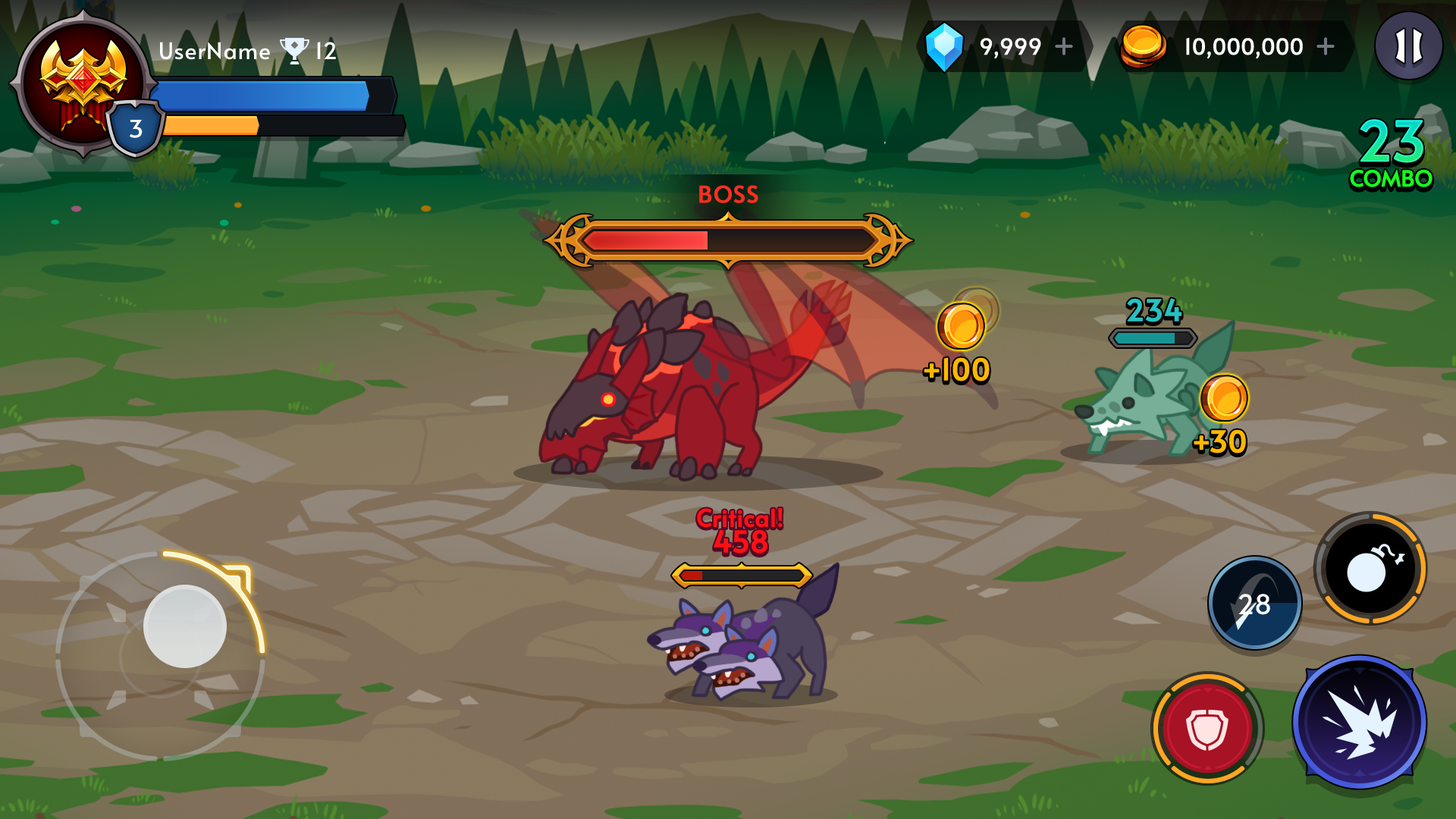
<style>
.page{position:relative;width:1456px;height:819px}
.page>*{position:absolute;margin:0}
.t1{font:22.7px "Alata-Regular";color:#ffffff}
.t2{font:21.9px "Alata-Regular";letter-spacing:-0.025em;color:#ffffff;font-weight:bold}
.t3{font:24.2px "Alata-Regular";color:#fbfde7}
.t4{font:54.6px "Alata-Regular";font-weight:bold}
.t5{font:21.8px "Alata-Regular";color:#15ff20;font-weight:bold}
.t6{font:21.8px "Alata-Regular";font-weight:bold}
.t7{font:22.7px "Alata-Regular";color:#ff2e21;text-transform:uppercase;font-weight:bold}
.t8{font:29.1px "Alata-Regular";font-weight:bold}
.t9{font:29.1px "Alata-Regular";color:#27c1c1;font-weight:bold}
.t10{font:29.1px "Alata-Regular";color:#ffb700;font-weight:bold}
.t11{font:23.7px "Alata-Regular";font-weight:bold}
.t12{font:23.7px "Alata-Regular";color:#fe1015;font-weight:bold}
.t13{font:29.1px "Alata-Regular";color:#fe1015;font-weight:bold}
.t14{font:27.3px "Alata-Regular";color:#ffffff}
</style>
<div class="page">
<p class="t1" style="left:160px;top:42px;width:110px;height:18px">UserName</p>
<p class="t1" style="left:317px;top:42px;width:19px;height:17px">12</p>
<p class="t2" style="left:981px;top:38px;width:60px;height:20px">9,999</p>
<p class="t2" style="left:1186px;top:37px;width:117px;height:21px">10,000,000</p>
<p class="t3" style="left:130px;top:120px;width:13px;height:18px">3</p>
<p class="t4" style="left:1360px;top:120px;width:63px;height:44px">23</p>
<p class="t4" style="left:1360px;top:121px;width:63px;height:44px">23</p>
<p class="t4" style="left:1360px;top:121px;width:63px;height:44px">23</p>
<p class="t4" style="left:1360px;top:122px;width:63px;height:44px">23</p>
<p class="t4" style="left:1360px;top:119px;width:63px;height:44px">23</p>
<p class="t5" style="left:1350px;top:170px;width:82px;height:18px">COMBO</p>
<p class="t6" style="left:1350px;top:171px;width:82px;height:18px">COMBO</p>
<p class="t6" style="left:1350px;top:171px;width:82px;height:19px">COMBO</p>
<p class="t5" style="left:1350px;top:169px;width:82px;height:18px">COMBO</p>
<p class="t7" style="left:699px;top:185px;width:59px;height:18px">Boss</p>
<p class="t8" style="left:1127px;top:300px;width:55px;height:24px">234</p>
<p class="t9" style="left:1127px;top:299px;width:55px;height:24px">234</p>
<p class="t9" style="left:1127px;top:298px;width:55px;height:24px">234</p>
<p class="t8" style="left:924px;top:360px;width:66px;height:24px">+100</p>
<p class="t10" style="left:924px;top:359px;width:66px;height:24px">+100</p>
<p class="t10" style="left:924px;top:358px;width:66px;height:24px">+100</p>
<p class="t10" style="left:924px;top:357px;width:66px;height:24px">+100</p>
<p class="t8" style="left:1194px;top:432px;width:52px;height:24px">+30</p>
<p class="t10" style="left:1194px;top:431px;width:52px;height:24px">+30</p>
<p class="t10" style="left:1194px;top:431px;width:52px;height:23px">+30</p>
<p class="t10" style="left:1194px;top:429px;width:52px;height:24px">+30</p>
<p class="t11" style="left:697px;top:510px;width:86px;height:19px">Critical!</p>
<p class="t12" style="left:697px;top:508px;width:86px;height:20px">Critical!</p>
<p class="t8" style="left:714px;top:532px;width:53px;height:24px">458</p>
<p class="t8" style="left:714px;top:531px;width:53px;height:24px">458</p>
<p class="t13" style="left:714px;top:530px;width:53px;height:24px">458</p>
<p class="t13" style="left:714px;top:529px;width:53px;height:25px">458</p>
<p class="t14" style="left:1238px;top:594px;width:32px;height:21px">28</p>
</div>
